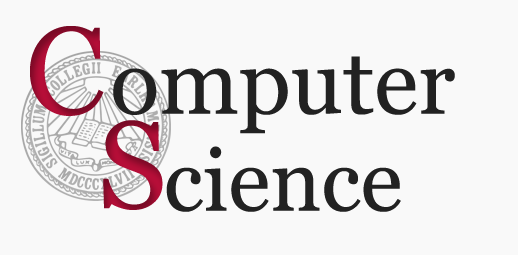
<style>
.page{position:relative;width:518px;height:255px;background:#f9f9f9}
.page>*{position:absolute;margin:0}
.t1{font:124px "Georgia"}
.t2{font:90.7px "Georgia";color:#222222}
.t3{font:86.5px "Georgia";color:#222222}
</style>
<div class="page">
<p class="t1" style="left:30px;top:26px;width:74px;height:90px">C</p>
<p class="t2" style="left:113px;top:56px;width:342px;height:78px">omputer</p>
<p class="t1" style="left:103px;top:120px;width:60px;height:90px">S</p>
<p class="t3" style="left:166px;top:146px;width:235px;height:66px">cience</p>
</div>
